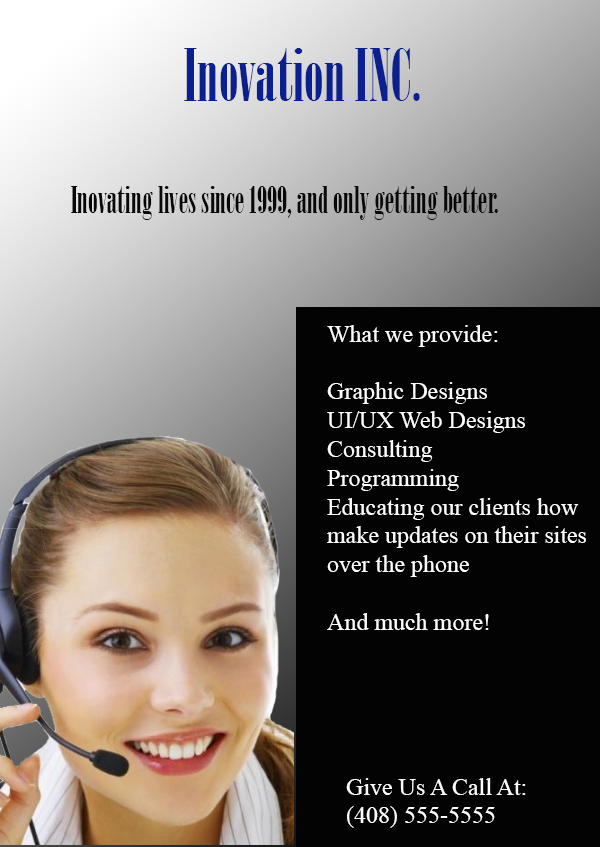
<style>
.page{position:relative;width:600px;height:847px;background:#030303}
.page>*{position:absolute;margin:0}
.t1{font:72px "Onyx";color:#0c1f8f}
.t2{font:36px "Onyx";color:#080808}
.t3{font:24px "TimesNewRomanPSMT";color:#fefdfd}
</style>
<div class="page">
<p class="t1" style="left:184px;top:48px;width:236px;height:53px">Inovation INC.</p>
<p class="t2" style="left:71px;top:186px;width:427px;height:34px">Inovating lives since 1999, and only getting better.</p>
<p class="t3" style="left:327px;top:325px;width:259px;height:305px">What we provide:<br><br>Graphic Designs<br>UI/UX Web Designs<br>Consulting <br>Programming<br>Educating our clients how <br>make updates on their sites<br>over the phone<br><br>And much more!</p>
<p class="t3" style="left:346px;top:778px;width:180px;height:50px">Give Us A Call At:<br>(408) 555-5555</p>
</div>
